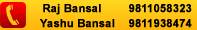
<style>
.page{position:relative;width:197px;height:30px}
.page>*{position:absolute;margin:0}
.t1{font:11px "Arial-BoldMT";color:#000000;font-weight:bold}
</style>
<div class="page">
<p class="t1" style="left:43px;top:4px;width:149px;height:11px">Raj Bansal        9811058323</p>
<p class="t1" style="left:40px;top:19px;width:152px;height:9px">Yashu Bansal    9811938474</p>
</div>
